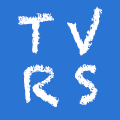
<style>
.page{position:relative;width:120px;height:120px;background:#2a74d4}
.page>*{position:absolute;margin:0}
.t1{font:49.8px/49.8px "Chalkduster";letter-spacing:-0.1em;color:#ffffff}
</style>
<div class="page">
<p class="t1" style="left:18px;top:6px;width:85px;height:102px;text-align:center">T V<br>R S</p>
</div>
